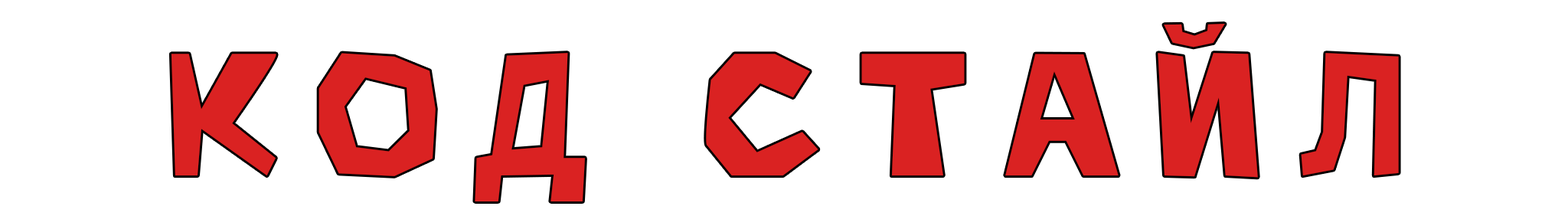
<style>
.page{position:relative;width:1568px;height:216px;background:#ffffff}
.page>*{position:absolute;margin:0}
.t1{font:177.6px "ZeroCool";letter-spacing:0.2em;color:#da2222}
</style>
<div class="page">
<p class="t1" style="left:171px;top:24px;width:1228px;height:177px">Код Стайл</p>
</div>
